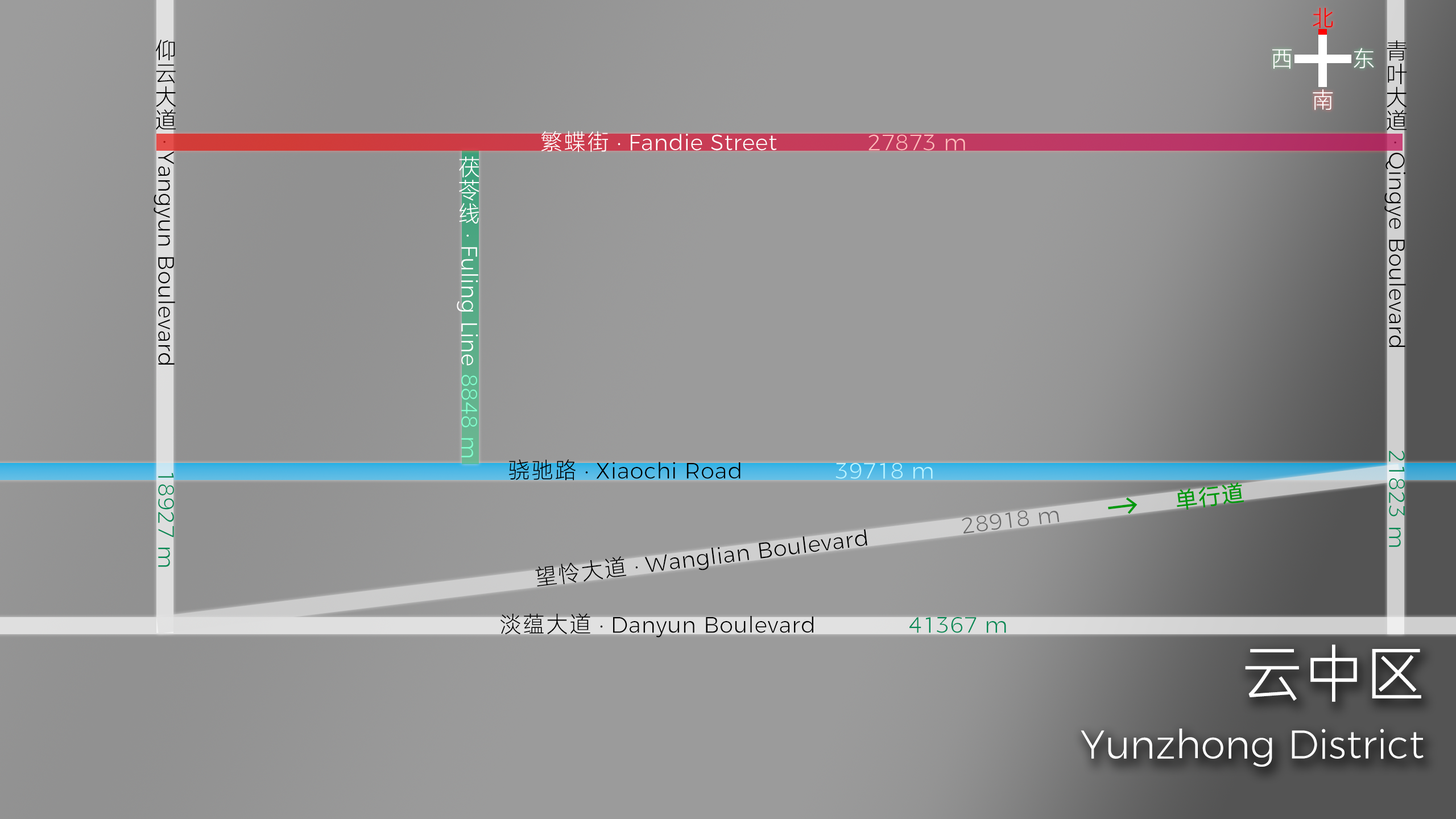
<style>
.page{position:relative;width:1456px;height:819px;background:#9b9b9b}
.page>*{position:absolute;margin:0}
.t1{font:22.7px/40.9px "Harfash";letter-spacing:0.025em;color:#ff0000}
.t2{font:22.7px/40.9px "Harfash";letter-spacing:0.025em;color:#ffffff}
.t3{font:22.7px/40.9px "Harfash";letter-spacing:0.025em;color:#000000}
.t4{font:22.7px/40.9px "Harfash";letter-spacing:0.025em;color:#008853}
.t5{font:22.7px "Harfash";letter-spacing:0.025em;color:#ffffff}
.t6{font:22.7px "Harfash";letter-spacing:0.025em;color:#ffbbbb}
.t7{font:22.7px/40.9px "Harfash";letter-spacing:0.025em;color:#83ffcf}
.t8{font:22.7px "Harfash";letter-spacing:0.025em;color:#000000}
.t9{font:22.7px "Harfash";letter-spacing:0.025em;color:#baf3ff}
.t10{font:22.7px "ReHarfash-Light";letter-spacing:0.025em;color:#00990e}
.t11{font:30.8px "ReHarfash-Light";letter-spacing:0.025em;color:#00990e;scale:1.08 1}
.t12{font:22.7px "Harfash";letter-spacing:0.025em;color:#686868}
.t13{font:22.7px "Harfash";letter-spacing:0.025em;color:#008853}
.t14{font:40.9px/79.6px "Harfash";letter-spacing:0.025em;color:#ffffff}
.t15{font:62.6px/79.6px "Harfash";letter-spacing:0.025em;color:#ffffff}
</style>
<div class="page">
<p class="t1" style="left:1313px;top:7px;width:20px;height:103px;text-align:right">北<br><span class="t2"><br>南</span></p>
<p class="t3" style="left:154px;top:39px;width:22px;height:528px;text-align:right">仰云大道 · Yangyun Boulevard     <span class="t4">18927 m</span></p>
<p class="t3" style="left:1384px;top:40px;width:23px;height:507px;text-align:right">青叶大道 · Qingye Boulevard     <span class="t4">21823 m</span></p>
<p class="t5" style="left:1272px;top:48px;width:102px;height:21px">西   东</p>
<p class="t5" style="left:541px;top:131px;width:424px;height:21px">繁蝶街 · Fandie Street     <span class="t6">27873 m</span></p>
<p class="t2" style="left:457px;top:156px;width:22px;height:301px;text-align:right">茯苓线 · Fuling Line <span class="t7">8848 m</span></p>
<p class="t8" style="left:509px;top:459px;width:424px;height:22px">骁驰路 · Xiaochi Road     <span class="t9">39718 m</span></p>
<p class="t10" style="left:1177px;top:482px;width:67px;height:28px;rotate:-7deg">单行道</p>
<p class="t11" style="left:1108px;top:497px;width:29px;height:17px;rotate:-7deg">→</p>
<p class="t8" style="left:535px;top:510px;width:525px;height:77px;rotate:-7deg">望怜大道 · Wanglian Boulevard     <span class="t12">28918 m</span></p>
<p class="t8" style="left:500px;top:613px;width:506px;height:25px">淡蕴大道 · Danyun Boulevard     <span class="t13">41367 m</span></p>
<p class="t14" style="left:1081px;top:644px;width:343px;height:123px;text-align:right"><span class="t15">云中区<br></span>Yunzhong District</p>
</div>
